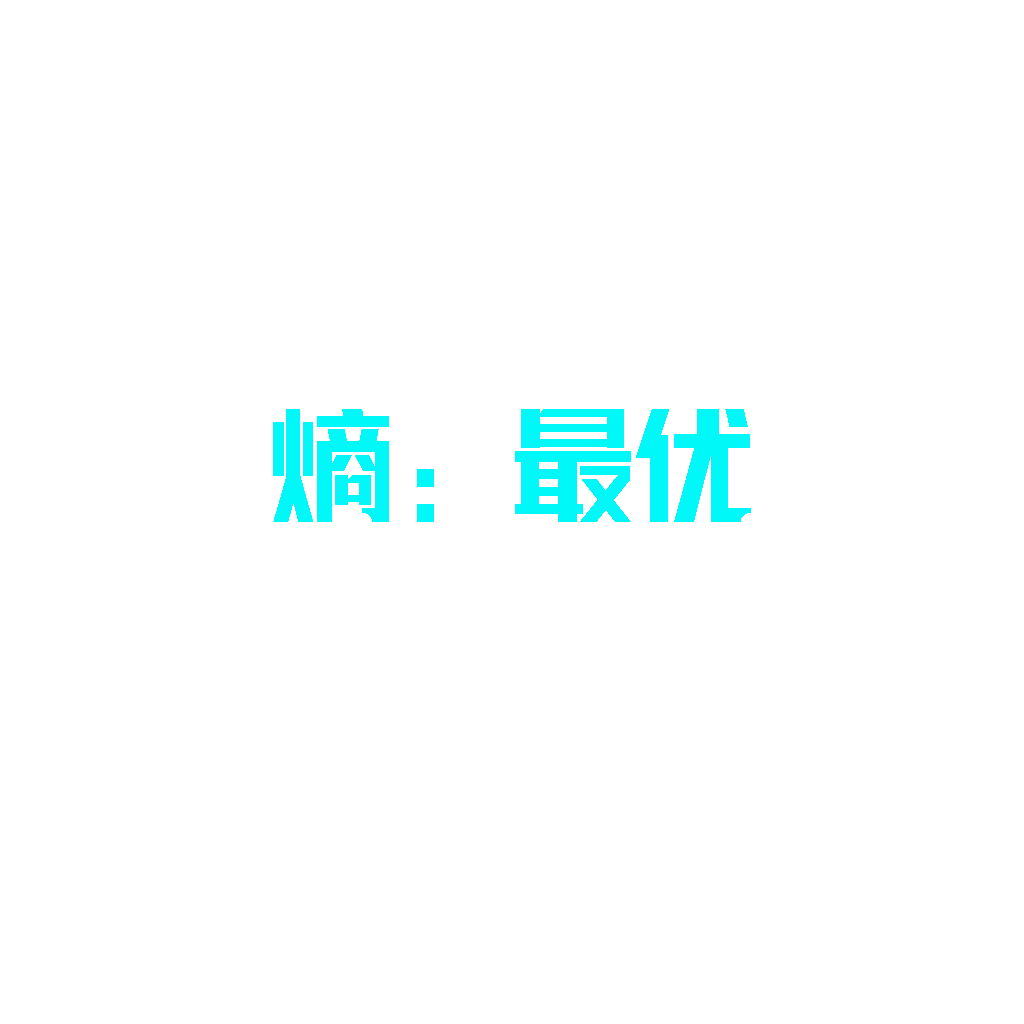
<style>
.page{position:relative;width:1024px;height:1024px;background:#ffffff}
.page>*{position:absolute;margin:0}
.t1{font:113px "lianmengqiyilushuaizhengruiheiti-Regular";color:#00f9f8}
</style>
<div class="page">
<p class="t1" style="left:273px;top:409px;width:478px;height:113px">熵：最优</p>
</div>
